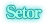
<style>
.page{position:relative;width:48px;height:25px}
.page>*{position:absolute;margin:0}
.t1{font:16px "RyuminPro-ExBold";letter-spacing:-0.08em;color:#9cffed}
</style>
<div class="page">
<p class="t1" style="left:6px;top:5px;width:36px;height:14px">Setor</p>
</div>
